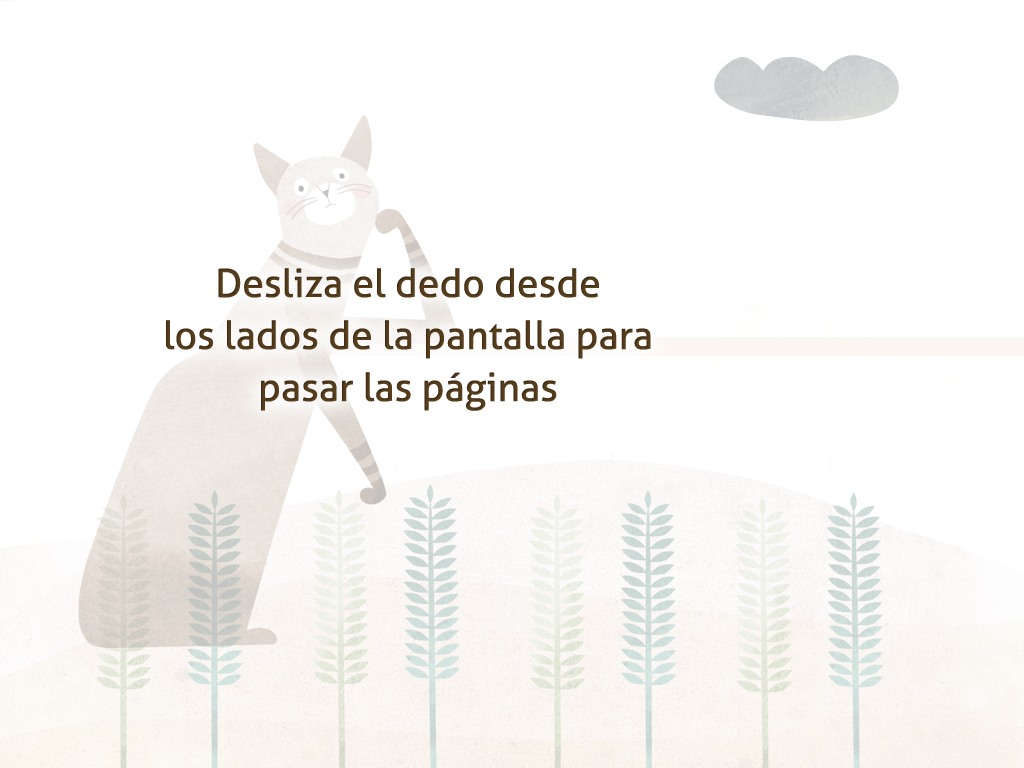
<style>
.page{position:relative;width:1024px;height:768px;background:#ffffff}
.page>*{position:absolute;margin:0}
.t1{font:39px/52px "Aller";color:#543b1b}
</style>
<div class="page">
<p class="t1" style="left:166px;top:268px;width:485px;height:143px;text-align:center">Desliza el dedo desde<br>los lados de la pantalla para<br>pasar las páginas</p>
</div>
